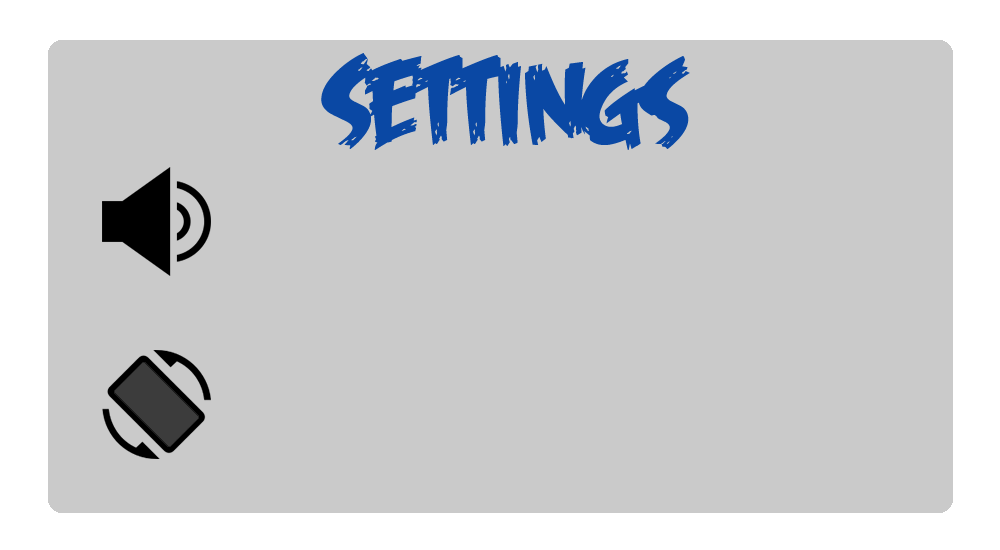
<style>
.page{position:relative;width:1000px;height:550px;background:#cacaca}
.page>*{position:absolute;margin:0}
.t1{font:120px "FeastofFleshBB";color:#0a48a4}
</style>
<div class="page">
<p class="t1" style="left:321px;top:53px;width:369px;height:97px">Settings</p>
</div>
